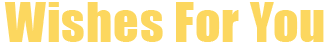
<style>
.page{position:relative;width:330px;height:44px;background:#ffffff}
.page>*{position:absolute;margin:0}
.t1{font:50px "Impact";letter-spacing:0.02em;color:#fcd75f}
</style>
<div class="page">
<p class="t1" style="left:4px;top:2px;width:320px;height:40px">Wishes For You</p>
</div>
